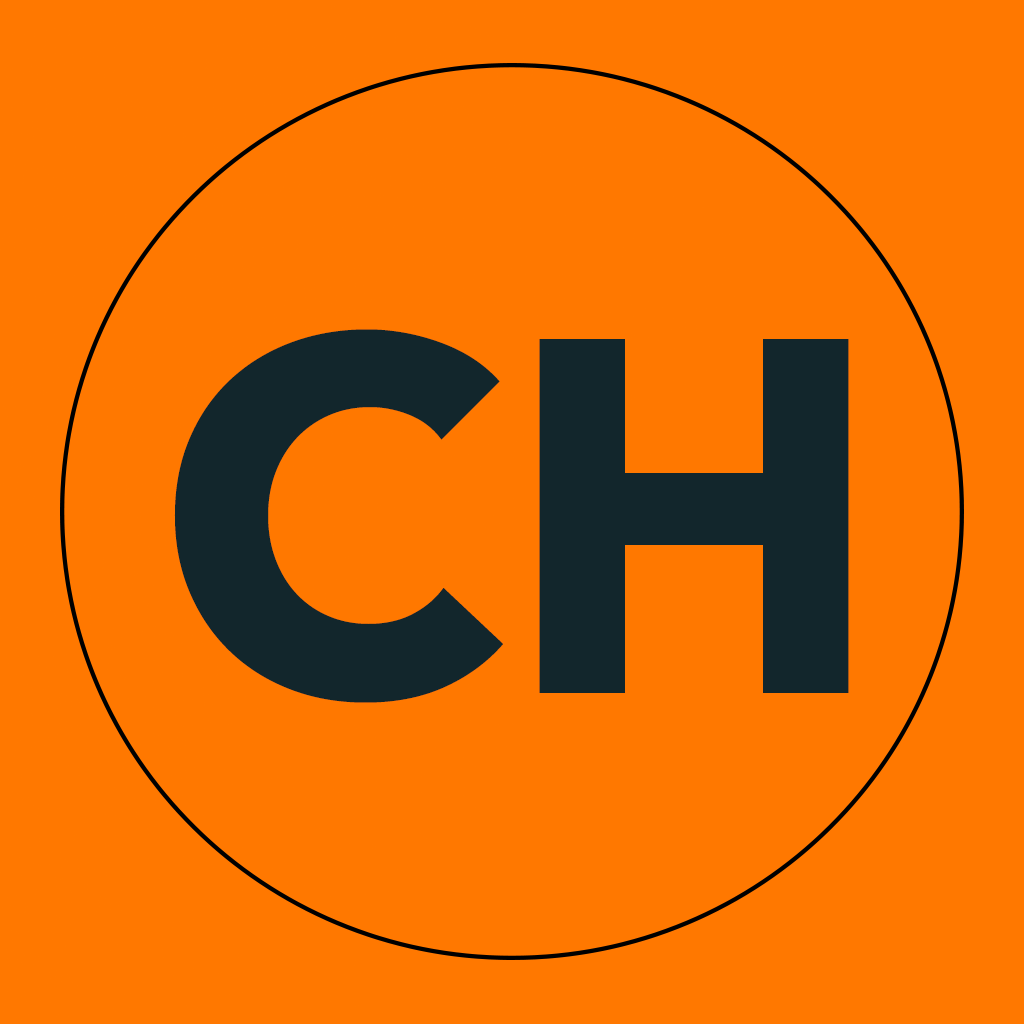
<style>
.page{position:relative;width:1024px;height:1024px;background:#ff7800}
.page>*{position:absolute;margin:0}
.t1{font:500px "AvenirNext-Bold";color:#12262c}
</style>
<div class="page">
<p class="t1" style="left:174px;top:329px;width:675px;height:374px">CH</p>
</div>
